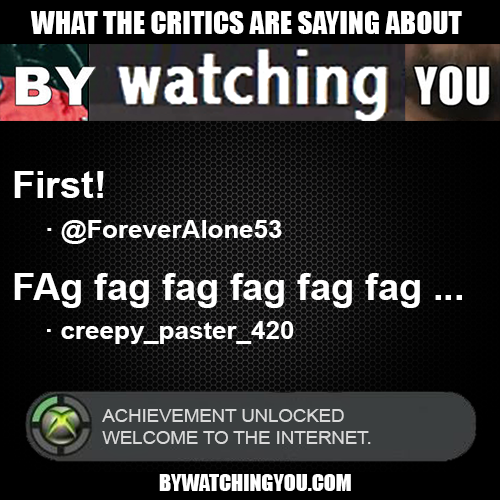
<style>
.page{position:relative;width:500px;height:500px}
.page>*{position:absolute;margin:0}
.t1{font:29.4px "Impact";color:#ffffff}
.t2{font:37.7px "Arial-BoldMT";color:#ffffff}
.t3{font:25.3px "Arial-BoldMT";color:#ffffff}
.t4{font:18.5px "ArialMT";color:#d9d9d9}
.t5{font:22px "Impact";color:#ffffff}
</style>
<div class="page">
<p class="t1" style="left:30px;top:11px;width:432px;height:23px">WHAT THE CRITICS ARE SAYING ABOUT</p>
<p class="t2" style="left:14px;top:171px;width:90px;height:27px">First!</p>
<p class="t3" style="left:47px;top:220px;width:235px;height:24px">· @ForeverAlone53</p>
<p class="t2" style="left:14px;top:273px;width:448px;height:35px">FAg fag fag fag fag fag ...</p>
<p class="t3" style="left:47px;top:321px;width:247px;height:23px">· creepy_paster_420</p>
<p class="t4" style="left:102px;top:409px;width:269px;height:35px">ACHIEVEMENT UNLOCKED<br>WELCOME TO THE INTERNET.</p>
<p class="t5" style="left:159px;top:474px;width:192px;height:17px">BYWATCHINGYOU.COM</p>
</div>
